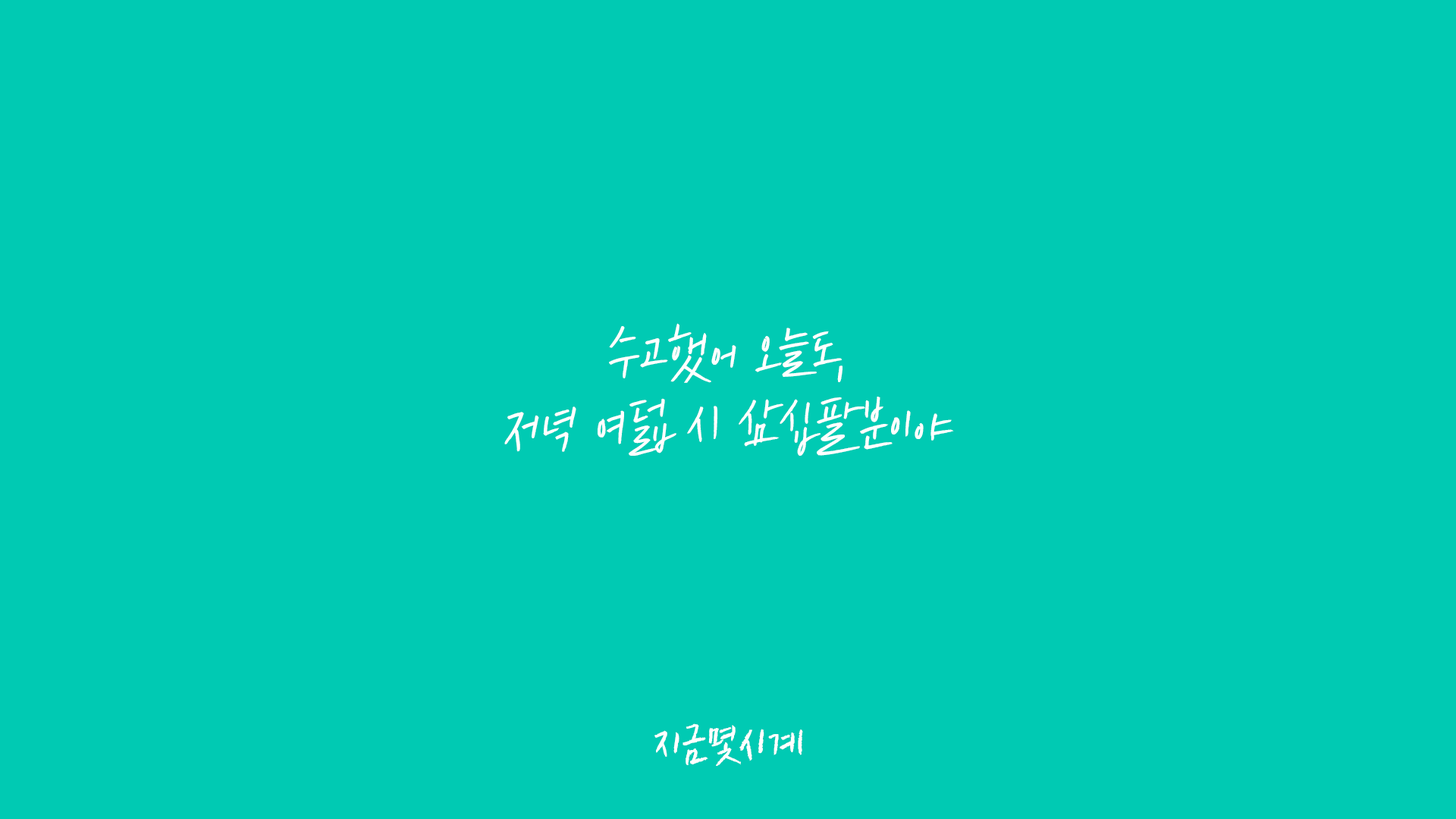
<style>
.page{position:relative;width:1456px;height:819px;background:#00cab3}
.page>*{position:absolute;margin:0}
.t1{font:60.7px "SDGongPen-bMd";color:#ffffff}
.t2{font:47.8px "SDGongPil-bBd";color:#ffffff}
</style>
<div class="page">
<p class="t1" style="left:504px;top:323px;width:450px;height:133px;text-align:center">수고했어 오늘도,<br>저녁 여덟 시 삼십팔분이야</p>
<p class="t2" style="left:654px;top:723px;width:149px;height:43px">지금몇시계</p>
</div>
